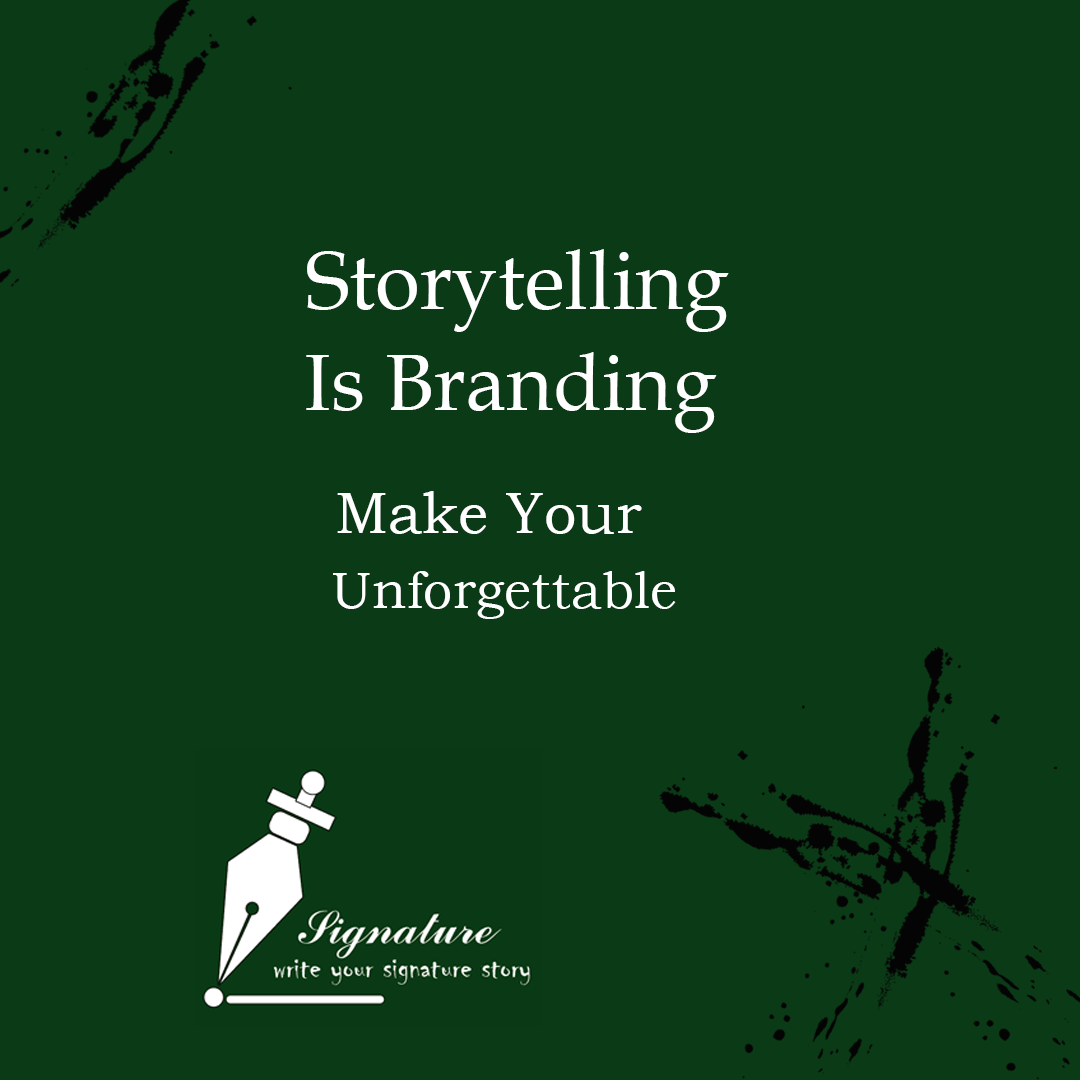
<style>
.page{position:relative;width:1080px;height:1080px;background:#0b3b16}
.page>*{position:absolute;margin:0}
.t1{font:81.9px "BookAntiqua";color:#ffffff}
.t2{font:80.3px "BookAntiqua";color:#ffffff}
.t3{font:58px "BookmanOldStyle";color:#ffffff}
.t4{font:52.4px "BookmanOldStyle";color:#ffffff}
</style>
<div class="page">
<p class="t1" style="left:307px;top:249px;width:422px;height:83px">Storytelling</p>
<p class="t2" style="left:306px;top:352px;width:411px;height:81px">Is Branding</p>
<p class="t3" style="left:337px;top:491px;width:305px;height:43px">Make Your</p>
<p class="t4" style="left:333px;top:571px;width:343px;height:48px">Unforgettable</p>
</div>
